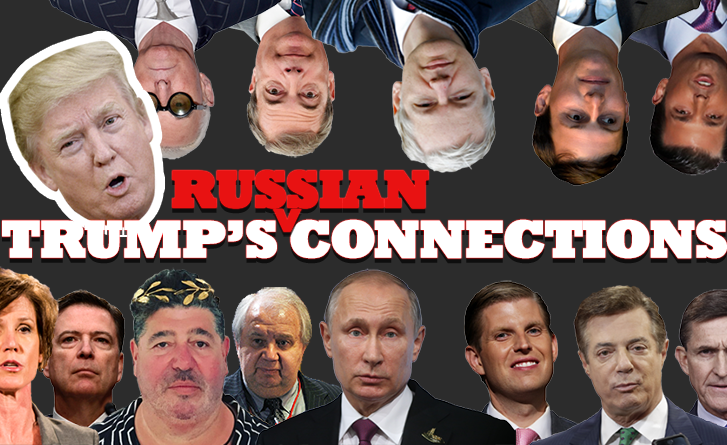
<style>
.page{position:relative;width:727px;height:445px;background:#2c2c2c}
.page>*{position:absolute;margin:0}
.t1{font:53.7px "Rockwell-ExtraBold";letter-spacing:-0.05em;color:#e81212;font-weight:bold}
.t2{font:53.7px "Rockwell-ExtraBold";letter-spacing:-0.05em;color:#ffffff;font-weight:bold}
</style>
<div class="page">
<p class="t1" style="left:172px;top:170px;width:257px;height:39px">RUSSIAN</p>
<p class="t2" style="left:2px;top:219px;width:725px;height:40px">TRUMP’S CONNECTIONS</p>
</div>
